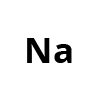
<style>
.page{position:relative;width:100px;height:100px;background:#ffffff}
.page>*{position:absolute;margin:0}
.t1{font:35px "OpenSans-Bold";color:#000000}
</style>
<div class="page">
<p class="t1" style="left:27px;top:38px;width:45px;height:25px">Na</p>
</div>
